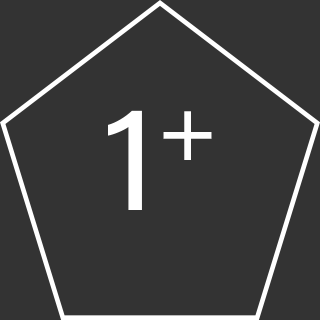
<style>
.page{position:relative;width:320px;height:320px;background:#333333}
.page>*{position:absolute;margin:0}
.t1{font:150px "AcuminConcept-Regular";color:#ffffff}
</style>
<div class="page">
<p class="t1" style="left:108px;top:110px;width:104px;height:100px">1+</p>
</div>
